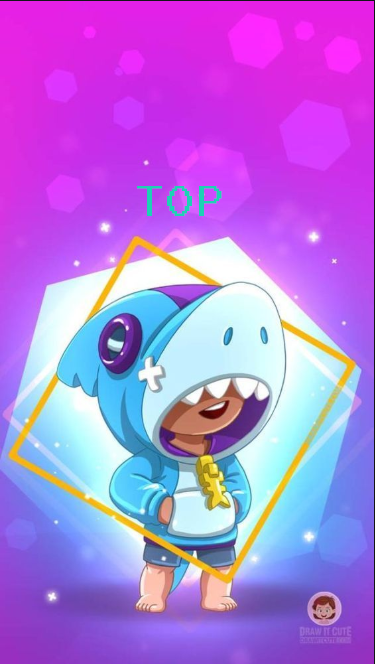
<style>
.page{position:relative;width:375px;height:664px}
.page>*{position:absolute;margin:0}
.t1{font:40px "System";color:#1dd1b5;text-transform:uppercase}
.t2{font:23.3px "System";color:#1dd1b5;text-transform:uppercase}
</style>
<div class="page">
<p class="t1" style="left:137px;top:186px;width:85px;height:30px"><span class="t2">  </span> <br>    <br>   Top</p>
</div>
